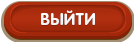
<style>
.page{position:relative;width:134px;height:42px}
.page>*{position:absolute;margin:0}
.t1{font:16px "RotondaC-Bold";letter-spacing:0.04em;color:#ffffff;text-transform:uppercase}
</style>
<div class="page">
<p class="t1" style="left:41px;top:10px;width:54px;height:15px">выйти</p>
</div>
